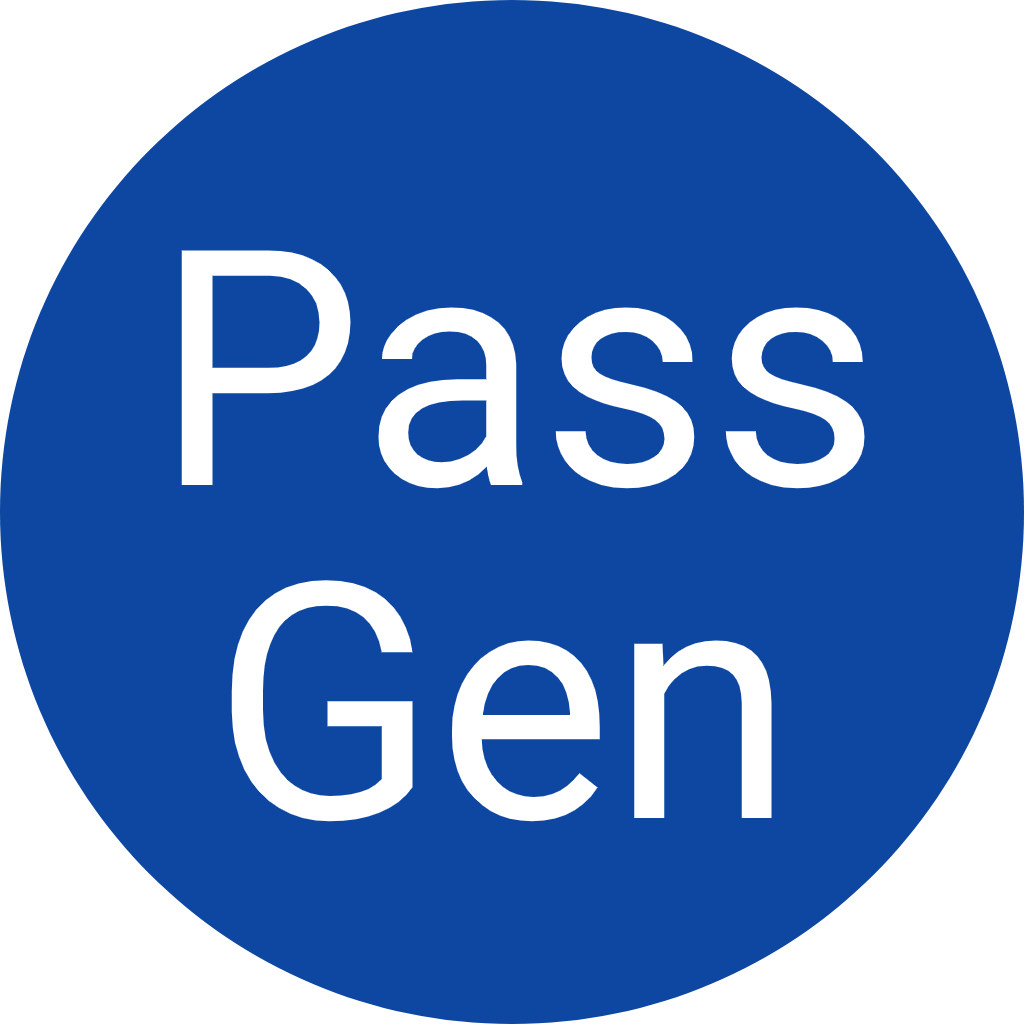
<style>
.page{position:relative;width:1024px;height:1024px;background:#0d47a1}
.page>*{position:absolute;margin:0}
.t1{font:330px "Roboto-Regular";color:#ffffff}
</style>
<div class="page">
<p class="t1" style="left:181px;top:250px;width:684px;height:239px">Pass</p>
<p class="t1" style="left:231px;top:580px;width:541px;height:242px">Gen</p>
</div>
